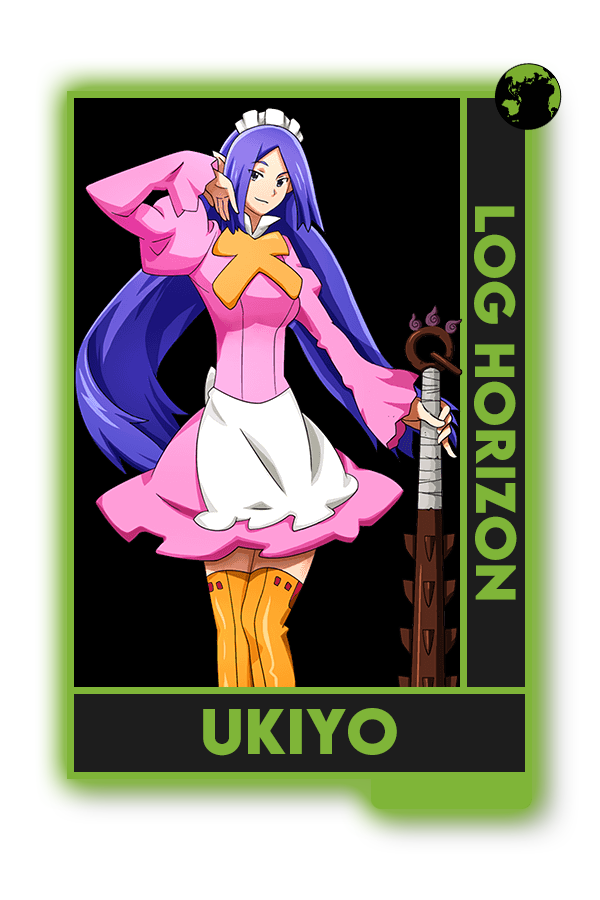
<style>
.page{position:relative;width:600px;height:900px;background:#ffffff}
.page>*{position:absolute;margin:0}
.t1{font:50px "LEMONMILK-Bold";color:#7fad41}
.t2{font:56.7px "LEMONMILK-Bold";color:#7fad41}
</style>
<div class="page">
<p class="t1" style="left:474px;top:206px;width:43px;height:394px;rotate:90deg">Log Horizon</p>
<p class="t2" style="left:203px;top:708px;width:194px;height:48px">Ukiyo</p>
</div>
